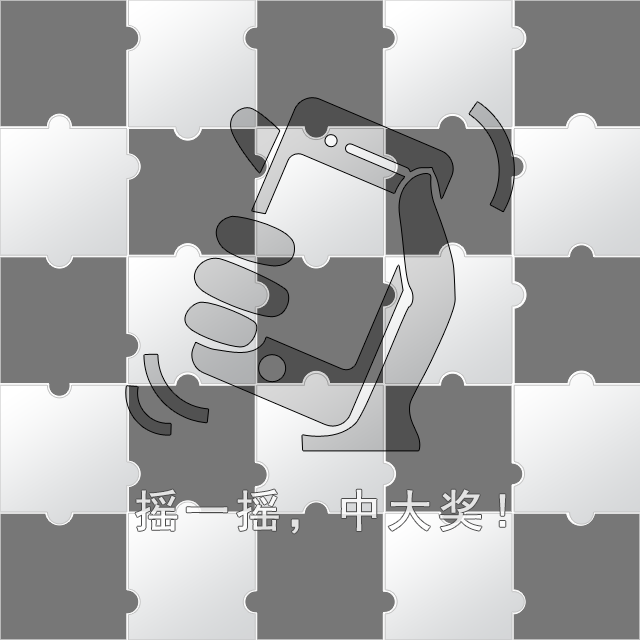
<style>
.page{position:relative;width:640px;height:640px;background:#777777}
.page>*{position:absolute;margin:0}
.t1{font:45px "SimHei";letter-spacing:0.1em;color:#eaeaea;font-weight:bold}
</style>
<div class="page">
<p class="t1" style="left:135px;top:489px;width:371px;height:45px">摇一摇，中大奖！</p>
</div>
